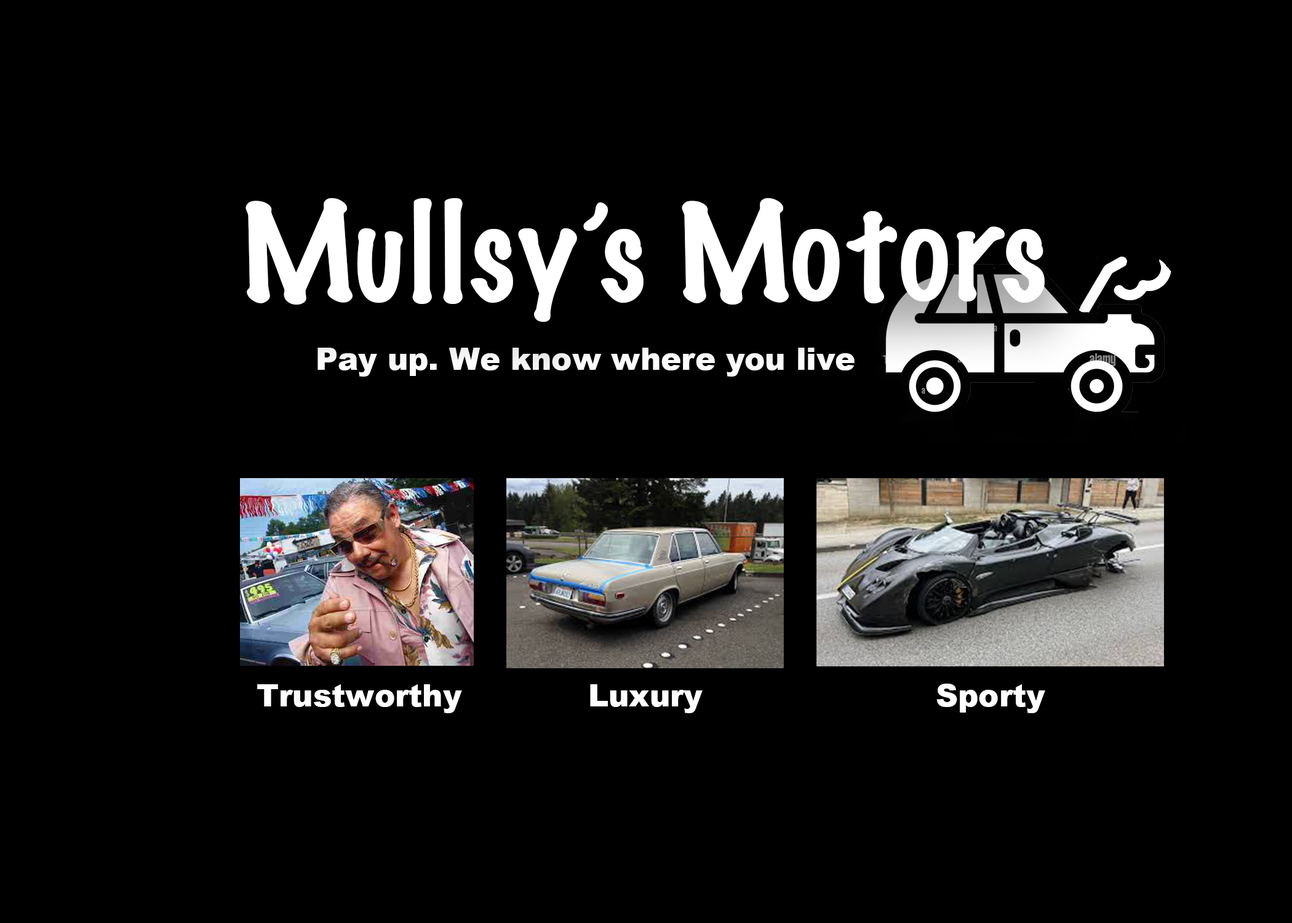
<style>
.page{position:relative;width:1292px;height:923px;background:#000000}
.page>*{position:absolute;margin:0}
.t1{font:123.1px "MarkerFelt-Thin";color:#ffffff}
.t2{font:30.8px "Arial-Black";color:#ffffff}
</style>
<div class="page">
<p class="t1" style="left:245px;top:198px;width:800px;height:124px">Mullsy’s Motors</p>
<p class="t2" style="left:317px;top:348px;width:538px;height:29px">Pay up. We know where you live</p>
<p class="t2" style="left:257px;top:684px;width:205px;height:29px">Trustworthy</p>
<p class="t2" style="left:590px;top:684px;width:113px;height:29px">Luxury</p>
<p class="t2" style="left:936px;top:684px;width:109px;height:29px">Sporty</p>
</div>
